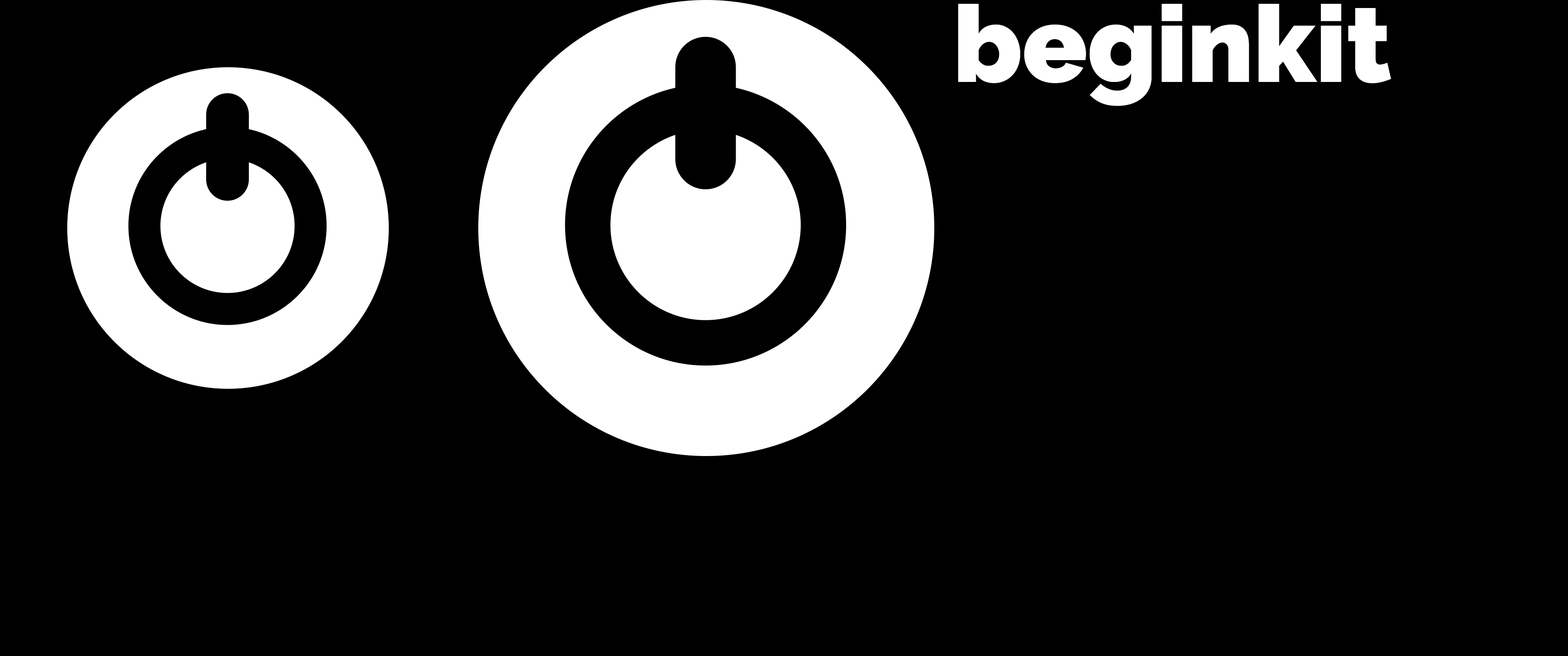
<style>
.page{position:relative;width:1568px;height:656px;background:#000000}
.page>*{position:absolute;margin:0}
.t1{font:106.9px "Raleway-Heavy";color:#ffffff}
</style>
<div class="page">
<p class="t1" style="left:958px;top:4px;width:433px;height:102px">beginkit</p>
</div>
